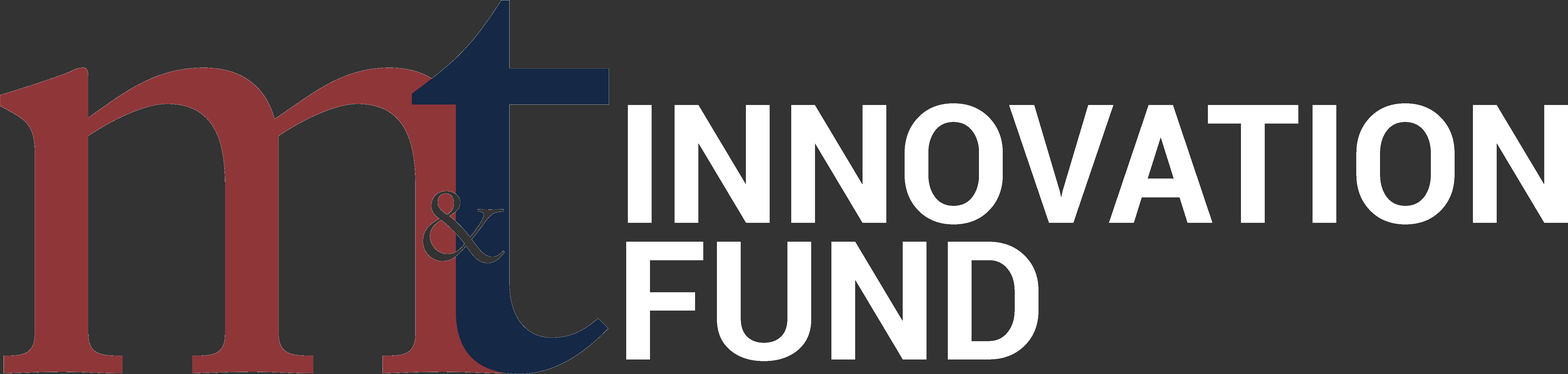
<style>
.page{position:relative;width:1568px;height:374px;background:#333333}
.page>*{position:absolute;margin:0}
.t1{font:165.1px/136.6px "Roboto-Bold";color:#ffffff;text-transform:uppercase}
</style>
<div class="page">
<p class="t1" style="left:626px;top:103px;width:942px;height:258px">Innovation<br>Fund</p>
</div>
